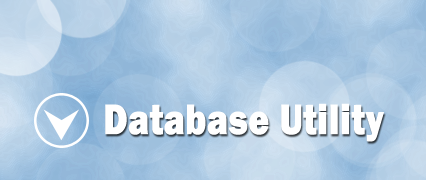
<style>
.page{position:relative;width:426px;height:180px}
.page>*{position:absolute;margin:0}
.t1{font:43.7px "FranklinGothic-Heavy";color:#ffffff;font-weight:bold;scale:0.81 1}
</style>
<div class="page">
<p class="t1" style="left:105px;top:103px;width:279px;height:39px">Database Utility</p>
</div>
